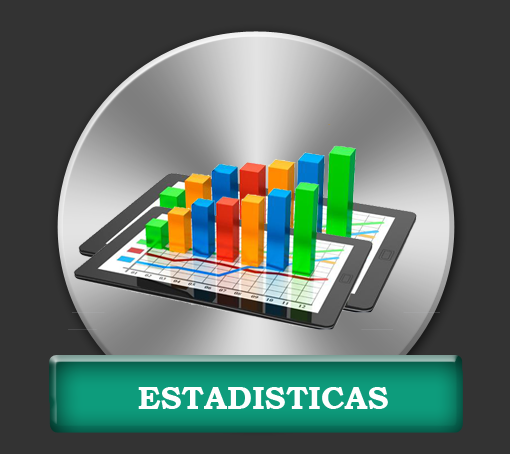
<style>
.page{position:relative;width:510px;height:454px;background:#333333}
.page>*{position:absolute;margin:0}
.t1{font:32px "BookmanOldStyle-Bold";color:#fdfefe}
</style>
<div class="page">
<p class="t1" style="left:138px;top:387px;width:250px;height:22px">ESTADISTICAS</p>
</div>
